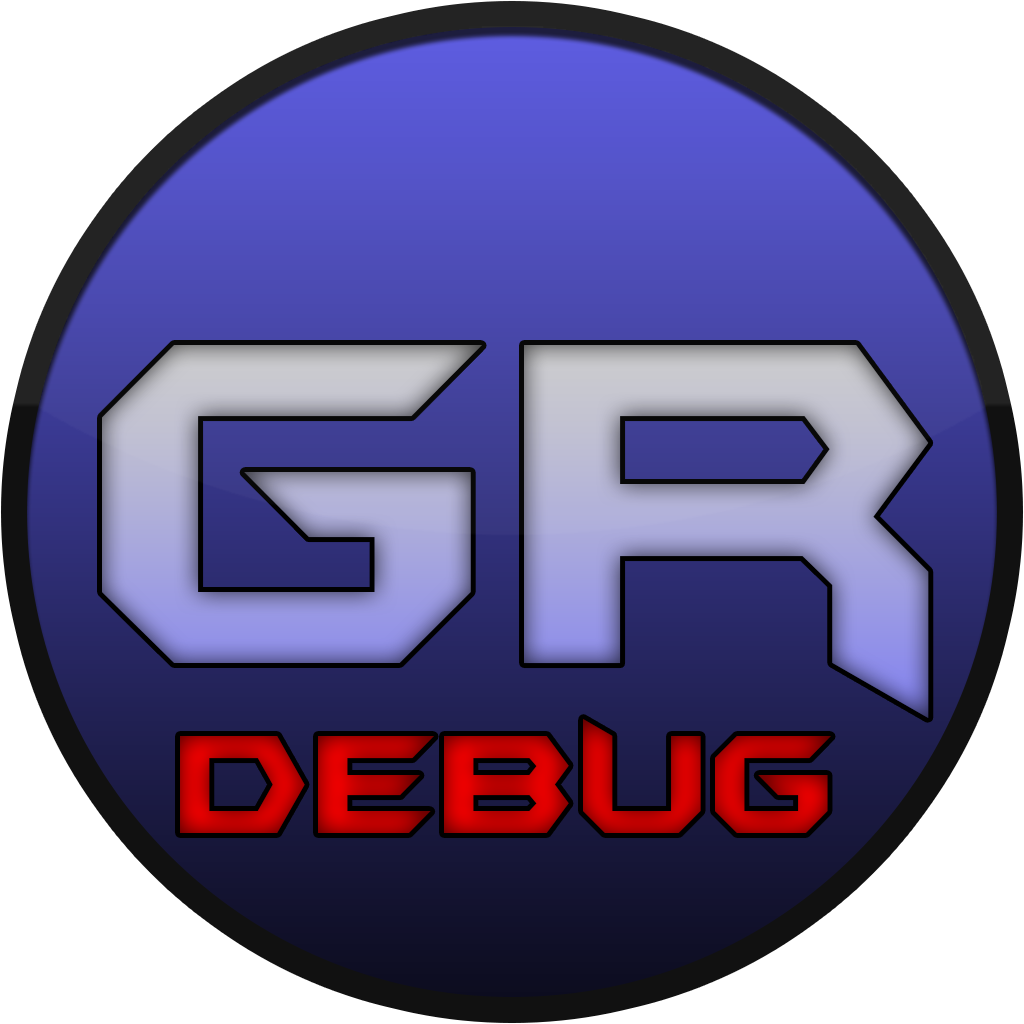
<style>
.page{position:relative;width:1024px;height:1024px;background:#ffffff}
.page>*{position:absolute;margin:0}
.t1{font:538.9px "BatmanForeverAlternate";letter-spacing:-0.03em}
.t2{font:164.5px "BatmanForeverAlternate";letter-spacing:-0.03em}
</style>
<div class="page">
<p class="t1" style="left:102px;top:345px;width:827px;height:373px">gr</p>
<p class="t2" style="left:180px;top:719px;width:651px;height:114px">DEBUG</p>
</div>
